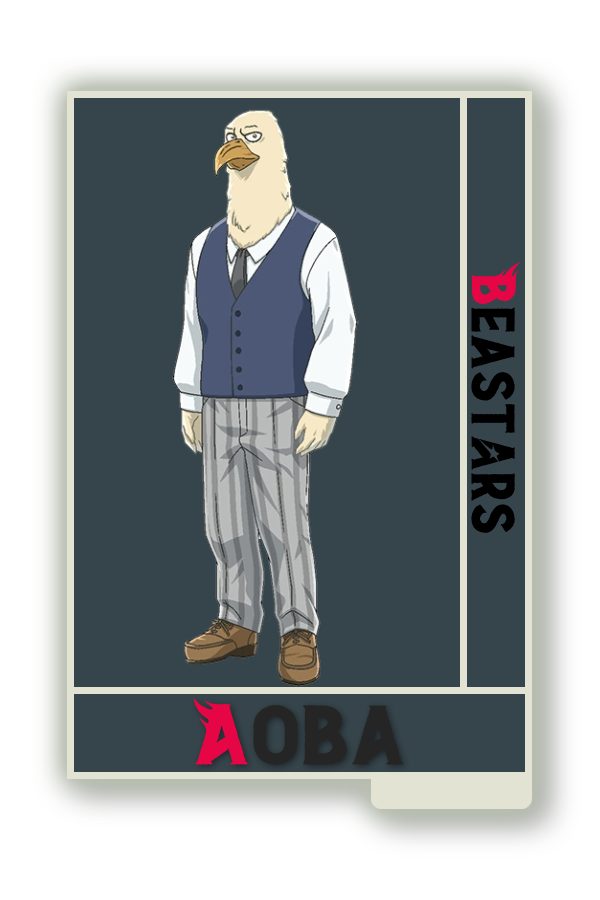
<style>
.page{position:relative;width:600px;height:900px;background:#36454b}
.page>*{position:absolute;margin:0}
.t1{font:48.8px "BEAST";color:#000000}
.t2{font:48.8px "BEAST";color:#e60646}
.t3{font:67px "BEAST";color:#252525;scale:1.12 1}
.t4{font:67px "BEAST";color:#e60646;scale:1.12 1}
</style>
<div class="page">
<p class="t1" style="left:471px;top:262px;width:50px;height:271px;rotate:90deg"><span class="t2">B</span>east@rs</p>
<p class="t3" style="left:193px;top:698px;width:211px;height:67px"><span class="t4">A</span>oba</p>
</div>
